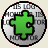
<style>
.page{position:relative;width:48px;height:48px;background:#ece9d8}
.page>*{position:absolute;margin:0}
.t1{font:6.5px "Tahoma";color:#000000}
</style>
<div class="page">
<p class="t1" style="left:3px;top:4px;width:43px;height:37px;text-align:center">IIS LOG MONITOR IIS LOG MONITOR IIS LOG MONITOR</p>
</div>
